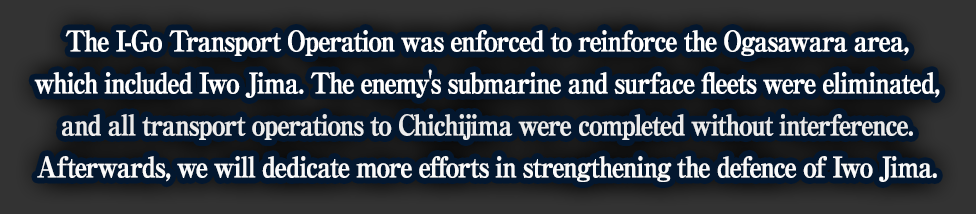
<style>
.page{position:relative;width:976px;height:214px;background:#03172f}
.page>*{position:absolute;margin:0}
.t1{font:28px/42px "RyuminPro-ExBold";letter-spacing:-0.08em;color:#ffffff;font-weight:bold;scale:0.9 1}
</style>
<div class="page">
<p class="t1" style="left:34px;top:30px;width:906px;height:152px;text-align:center">The I-Go Transport Operation was enforced to reinforce the Ogasawara area,<br>which included Iwo Jima. The enemy's submarine and surface fleets were eliminated,<br>and all transport operations to Chichijima were completed without interference.<br>Afterwards, we will dedicate more efforts in strengthening the defence of Iwo Jima.</p>
</div>
